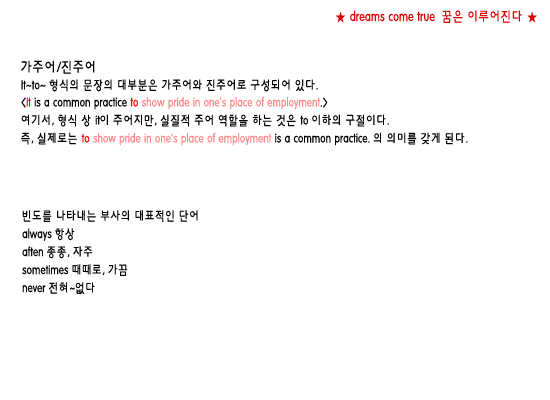
<style>
.page{position:relative;width:550px;height:400px;background:#ffffff}
.page>*{position:absolute;margin:0}
.t1{font:14px "HYkanM";letter-spacing:-0.01em;color:#dd0000;scale:0.8 1}
.t2{font:13px/18px "HYkanM";letter-spacing:-0.01em;color:#000000;scale:0.8 1}
.t3{font:15px/18px "HYkanM";letter-spacing:-0.01em;color:#000000;scale:0.8 1}
.t4{font:13px/18px "HYkanM";letter-spacing:-0.01em;color:#ff0000;scale:0.8 1}
.t5{font:13px/18px "HYkanM";letter-spacing:-0.01em;color:#ff8888;scale:0.8 1}
</style>
<div class="page">
<p class="t1" style="left:336px;top:10px;width:201px;height:13px">★ dreams come true  꿈은 이루어진다 ★</p>
<p class="t2" style="left:21px;top:60px;width:447px;height:86px"><span class="t3">가주어/진주어<br></span>It~to~ 형식의 문장의 대부분은 가주어와 진주어로 구성되어 있다.<br>&lt;<span class="t4">It</span> is a common practice <span class="t4">to </span><span class="t5">show pride in one's place of employment</span>.&gt;<br>여기서, 형식 상 it이 주어지만, 실질적 주어 역할을 하는 것은 to 이하의 구절이다.<br>즉, 실제로는 <span class="t4">to </span><span class="t5">show pride in one's place of employment </span>is a common practice. 의 의미를 갖게 된다.</p>
<p class="t2" style="left:22px;top:210px;width:176px;height:85px">빈도를 나타내는 부사의 대표적인 단어<br>always 항상<br>aften 종종, 자주<br>sometimes 때때로, 가끔<br>never 전혀~없다</p>
</div>
